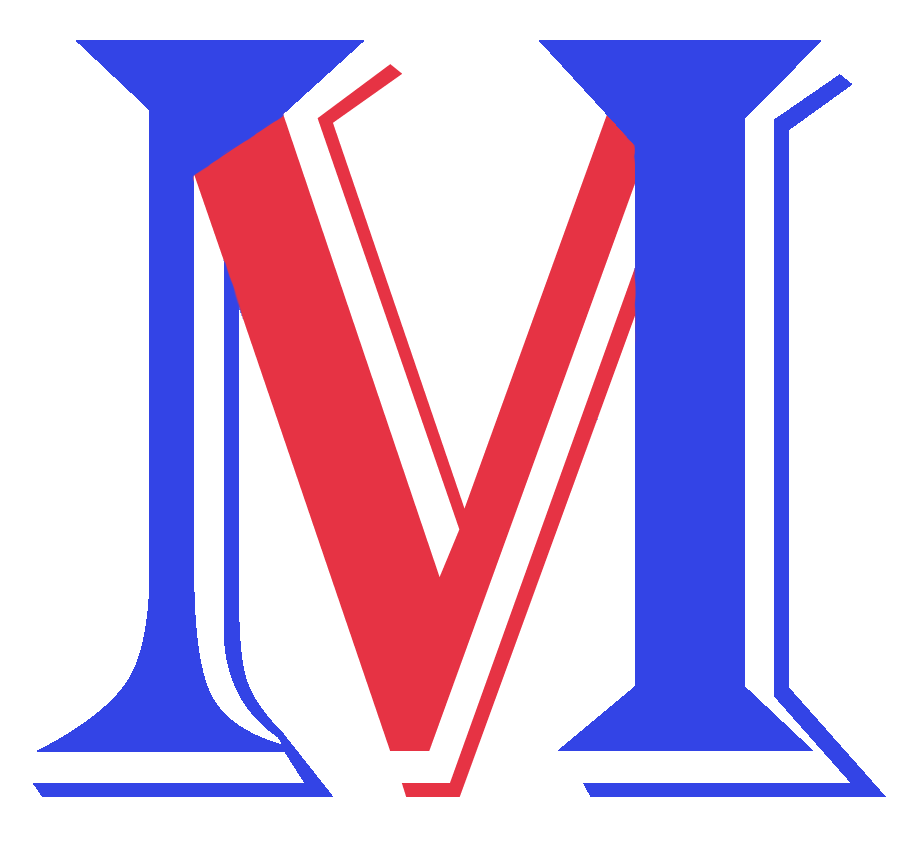
<style>
.page{position:relative;width:914px;height:850px;background:#ffffff}
.page>*{position:absolute;margin:0}
.t1{font:1133.6px "Algerian"}
</style>
<div class="page">
<p class="t1" style="left:33px;top:40px;width:853px;height:757px">M</p>
</div>
